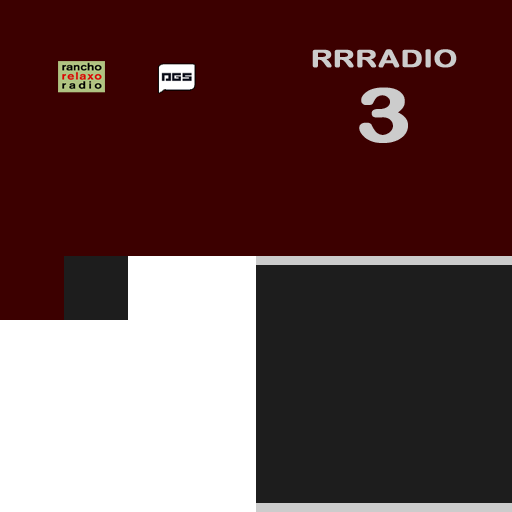
<style>
.page{position:relative;width:512px;height:512px;background:#3c0000}
.page>*{position:absolute;margin:0}
.t1{font:24.2px/74.2px "ArialRoundedMTBold";color:#cccccc;font-weight:bold;scale:1.24 1}
.t2{font:74.2px/74.2px "ArialRoundedMTBold";color:#cccccc;font-weight:bold;scale:1.24 1}
</style>
<div class="page">
<p class="t1" style="left:312px;top:49px;width:145px;height:94px;text-align:center">RRRADIO<br><span class="t2">3</span></p>
</div>
